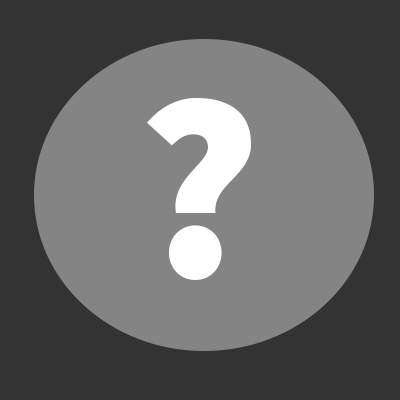
<style>
.page{position:relative;width:400px;height:400px;background:#333333}
.page>*{position:absolute;margin:0}
.t1{font:262.5px "SourceSansPro-Black";color:#ffffff}
</style>
<div class="page">
<p class="t1" style="left:147px;top:98px;width:104px;height:182px">?</p>
</div>
